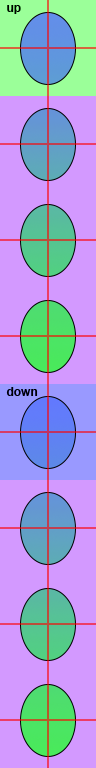
<style>
.page{position:relative;width:96px;height:768px;background:#d399ff}
.page>*{position:absolute;margin:0}
.t1{font:12px "Arial-BoldMT";color:#000000}
</style>
<div class="page">
<p class="t1" style="left:7px;top:5px;width:14px;height:9px">up</p>
<p class="t1" style="left:6px;top:387px;width:32px;height:9px">down</p>
</div>
